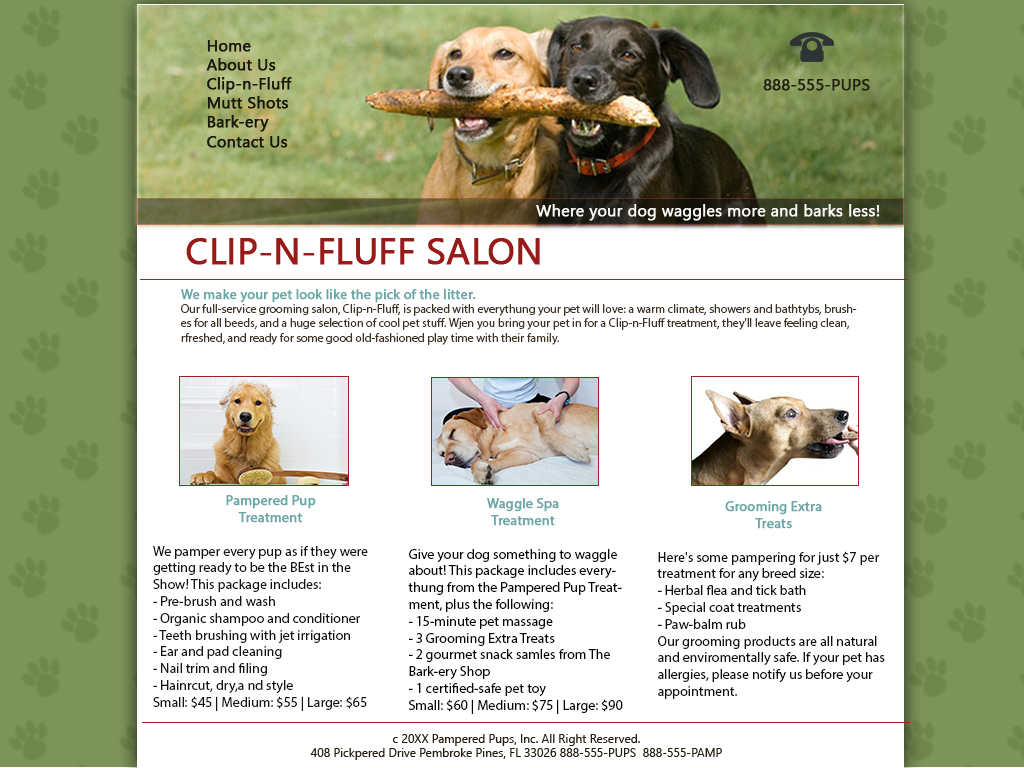
<style>
.page{position:relative;width:1024px;height:768px;background:#ffffff}
.page>*{position:absolute;margin:0}
.t1{font:16px "SegoeUI";color:#1a180b;font-weight:bold}
.t2{font:16px "SegoeUI";color:#242214;font-weight:bold}
.t3{font:16px "SegoeUI";color:#ffffff;font-weight:bold}
.t4{font:16px "SegoeUI";color:#fcf9f9;font-weight:bold}
.t5{font:36px "SegoeUI";color:#981b1a;text-transform:uppercase;font-weight:bold}
.t6{font:12px "MyriadPro-Regular";color:#403323}
.t7{font:14px "MyriadPro-Regular";color:#6ba7a7;font-weight:bold}
.t8{font:14px "MyriadPro-Regular";color:#131310}
.t9{font:14px "MyriadPro-Regular";color:#040404}
.t10{font:14px "MyriadPro-Regular";color:#0f0e0e}
.t11{font:12px "SegoeUI";color:#241e10}
</style>
<div class="page">
<p class="t1" style="left:206px;top:40px;width:86px;height:108px">Home<br>About Us<br>Clip-n-Fluff<br>Mutt Shots<br>Bark-ery<br>Contact Us</p>
<p class="t2" style="left:763px;top:79px;width:107px;height:12px"><span class="t3"><br></span>888-555-PUPS</p>
<p class="t4" style="left:536px;top:204px;width:344px;height:17px">Where your dog waggles more and barks less!</p>
<p class="t5" style="left:186px;top:238px;width:354px;height:27px">clip-n-fluff salon</p>
<p class="t6" style="left:181px;top:289px;width:676px;height:56px"><span class="t7">We make your pet look like the pick of the litter.<br></span>Our full-service grooming salon, Clip-n-Fluff, is packed with everythung your pet will love: a warm climate, showers and bathtybs, brushes for all beeds, and a huge selection of cool pet stuff. Wjen you bring your pet in for a Clip-n-Fluff treatment, they'll leave feeling clean, rfreshed, and ready for some good old-fashioned play time with their family.</p>
<p class="t8" style="left:153px;top:495px;width:215px;height:216px;text-align:center"><span class="t7">Pampered Pup <br>Treatment <br><br></span>We pamper every pup as if they were getting ready to be the BEst in the Show! This package includes:<br>- Pre-brush and wash<br>- Organic shampoo and conditioner<br>- Teeth brushing with jet irrigation<br>- Ear and pad cleaning<br>- Nail trim and filing<br>- Hainrcut, dry,a nd style<br>Small: $45 | Medium: $55 | Large: $65</p>
<p class="t9" style="left:408px;top:498px;width:215px;height:216px;text-align:center"><span class="t7">Waggle Spa <br>Treatment<br><br></span>Give your dog something to waggle about! This package includes everythung from the Pampered Pup Treatment, plus the following:<br>- 15-minute pet massage<br>- 3 Grooming Extra Treats<br>- 2 gourmet snack samles from The Bark-ery Shop<br>- 1 certified-safe pet toy<br>Small: $60 | Medium: $75 | Large: $90</p>
<p class="t10" style="left:657px;top:501px;width:228px;height:198px;text-align:center"><span class="t7">Grooming Extra <br>Treats<br><br></span>Here's some pampering for just $7 per treatment for any breed size:<br>- Herbal flea and tick bath<br>- Special coat treatments<br>- Paw-balm rub<br>Our grooming products are all natural and enviromentally safe. If your pet has allergies, please notify us before your appointment.</p>
<p class="t11" style="left:310px;top:734px;width:412px;height:26px;text-align:center">c 20XX Pampered Pups, Inc. All Right Reserved.<br>408 Pickpered Drive Pembroke Pines, FL 33026 888-555-PUPS  888-555-PAMP</p>
</div>
